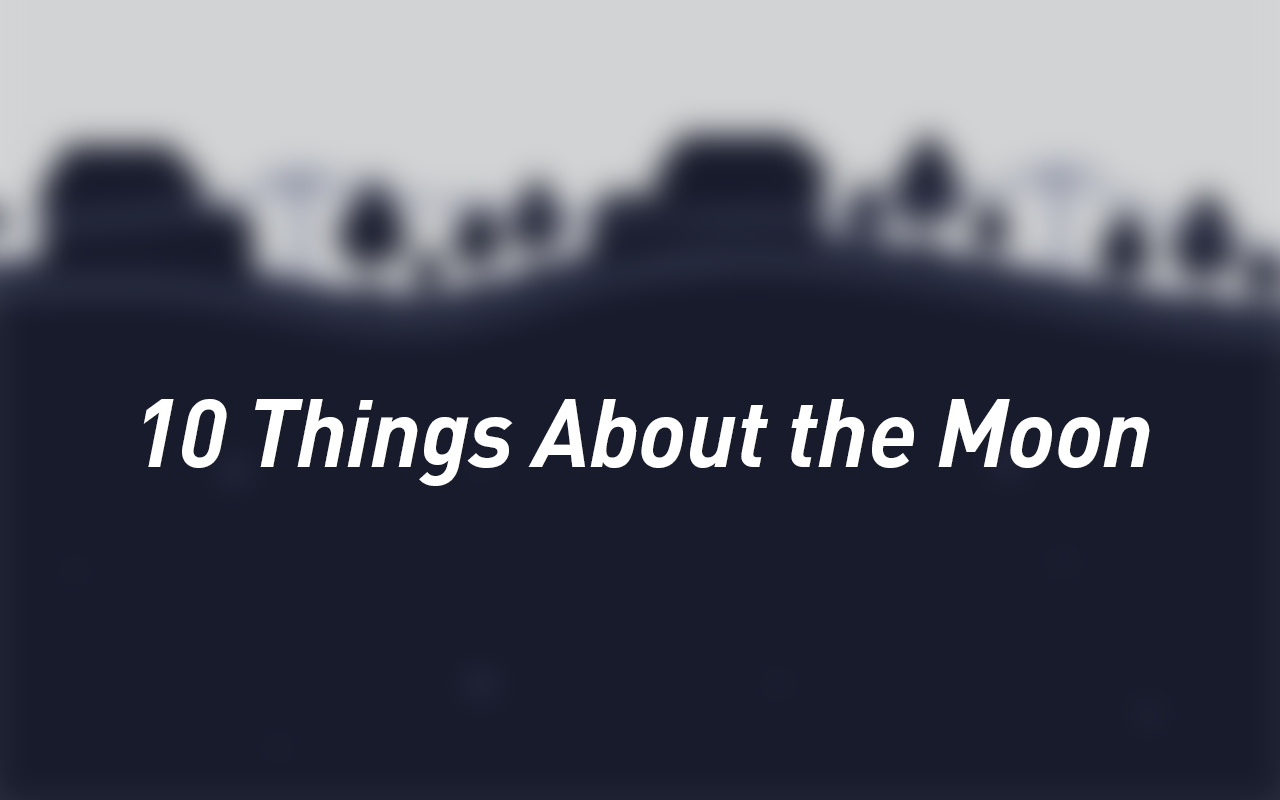
<style>
.page{position:relative;width:1280px;height:800px;background:#181b2c}
.page>*{position:absolute;margin:0}
.t1{font:94.2px "DIN-BoldItalic";letter-spacing:-0.01em;color:#ffffff}
</style>
<div class="page">
<p class="t1" style="left:143px;top:399px;width:1007px;height:87px">10 Things About the Moon</p>
</div>
